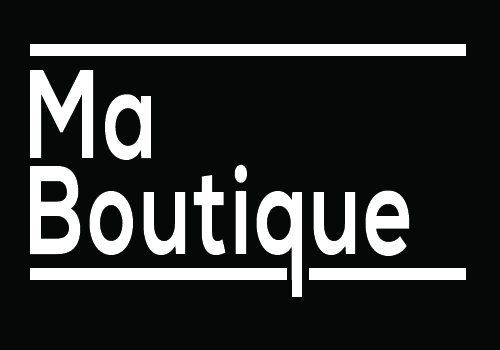
<style>
.page{position:relative;width:500px;height:350px;background:#060808}
.page>*{position:absolute;margin:0}
.t1{font:125.5px/96.3px "NexaBold";letter-spacing:0.04em;color:#ffffff;scale:0.68 1}
</style>
<div class="page">
<p class="t1" style="left:30px;top:70px;width:380px;height:210px">Ma <br>Boutique</p>
</div>
